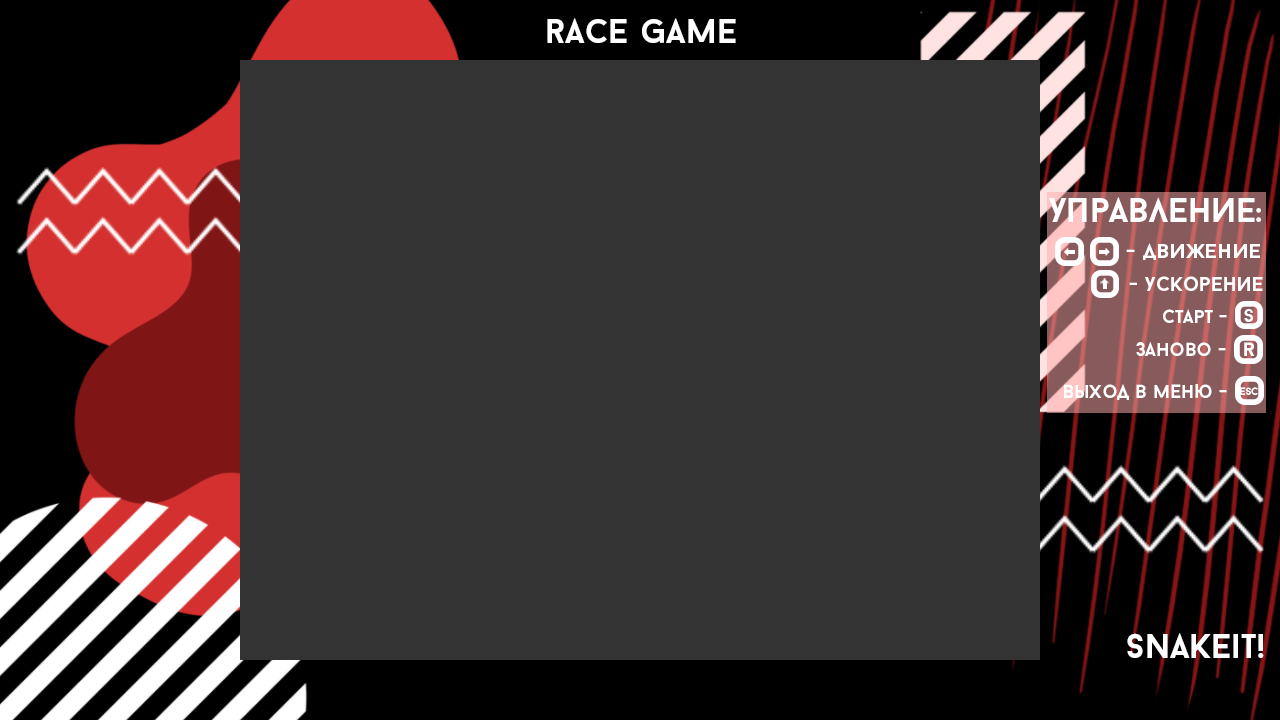
<style>
.page{position:relative;width:1280px;height:720px;background:#333333}
.page>*{position:absolute;margin:0}
.t1{font:34px "BaronNeueBold";color:#ffffff}
.t2{font:20.2px "BaronNeueBold";color:#ffffff;scale:1.07 1}
.t3{font:20.2px "BaronNeueBold";color:#ffffff}
.t4{font:18.7px "BaronNeueBold";color:#ffffff}
.t5{font:19.3px "BaronNeueBold";color:#ffffff}
.t6{font:19.3px "BaronNeueBold";color:#ffffff;scale:1.07 1}
.t7{font:19.3px "BaronNeueBold";color:#ffffff;scale:0.97 1}
.t8{font:10.5px "BaronNeueBold";color:#ffffff}
</style>
<div class="page">
<p class="t1" style="left:547px;top:18px;width:189px;height:25px">race game</p>
<p class="t1" style="left:1049px;top:197px;width:212px;height:25px">Управление:</p>
<p class="t2" style="left:1126px;top:243px;width:134px;height:17px">- движение</p>
<p class="t3" style="left:1129px;top:276px;width:134px;height:15px">- ускорение</p>
<p class="t4" style="left:1163px;top:309px;width:64px;height:14px">старт -</p>
<p class="t4" style="left:1244px;top:309px;width:9px;height:13px">s</p>
<p class="t5" style="left:1136px;top:342px;width:90px;height:14px">заново -</p>
<p class="t6" style="left:1244px;top:342px;width:11px;height:14px">r</p>
<p class="t7" style="left:1064px;top:384px;width:163px;height:16px">выход в меню -</p>
<p class="t8" style="left:1240px;top:387px;width:18px;height:8px">esc</p>
<p class="t1" style="left:1127px;top:633px;width:137px;height:25px">snakeit!</p>
</div>
